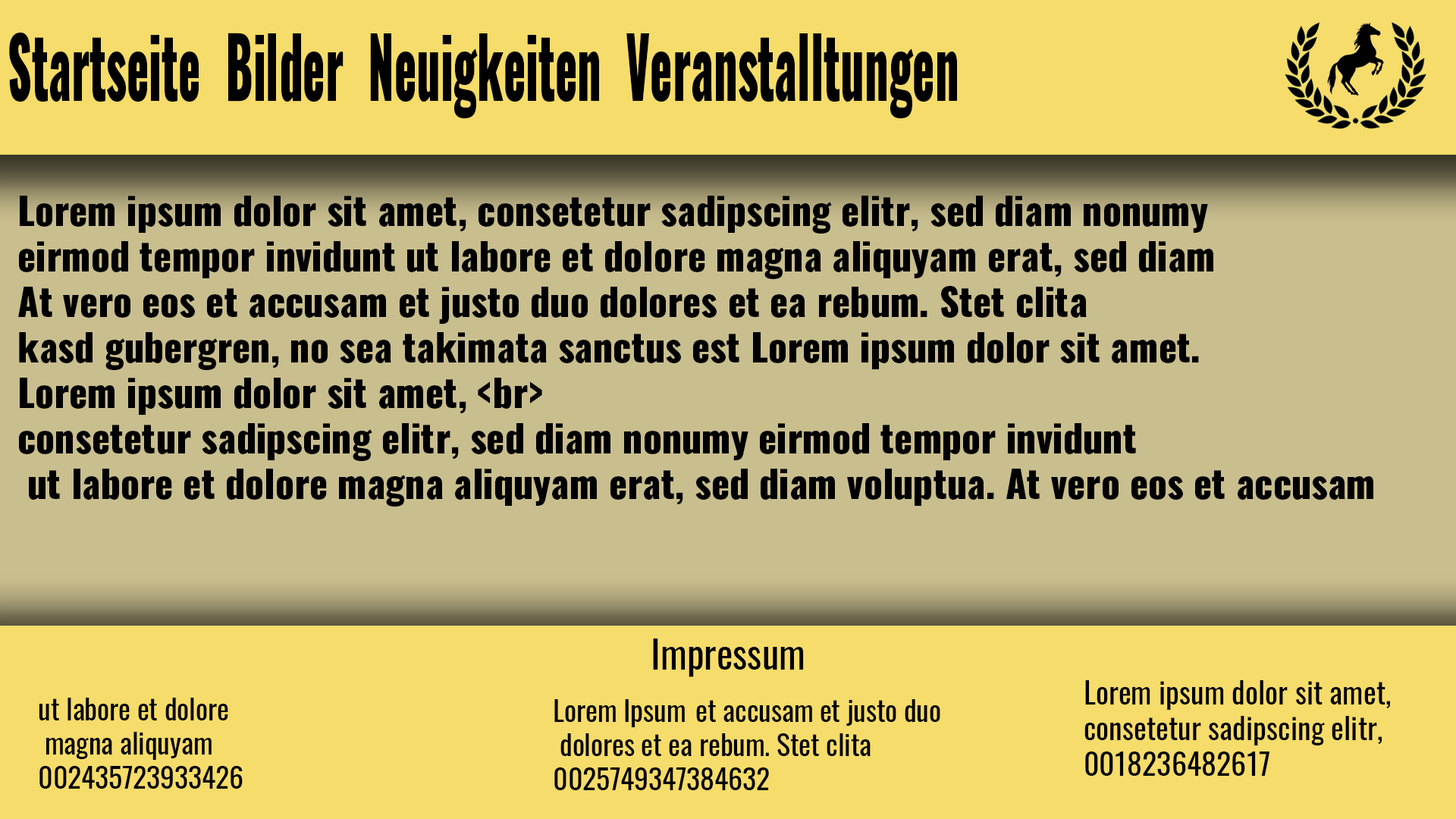
<style>
.page{position:relative;width:1456px;height:819px;background:#f6dc6a}
.page>*{position:absolute;margin:0}
.t1{font:83.3px "OswaldHeavy-Regular";color:#000000;scale:0.55 1}
.t2{font:37.9px "OswaldHeavy-Regular";color:#000000}
.t3{font:38.8px "Oswald-Regular";color:#000000}
.t4{font:29.8px "Oswald-Regular";color:#000000}
.t5{font:28.4px "Oswald-Regular";color:#000000}
</style>
<div class="page">
<p class="t1" style="left:9px;top:32px;width:948px;height:86px">Startseite  Bilder  Neuigkeiten  Veranstalltungen</p>
<p class="t2" style="left:18px;top:196px;width:1355px;height:311px">Lorem ipsum dolor sit amet, consetetur sadipscing elitr, sed diam nonumy <br>          eirmod tempor invidunt ut labore et dolore magna aliquyam erat, sed diam <br>          At vero eos et accusam et justo duo dolores et ea rebum. Stet clita <br>          kasd gubergren, no sea takimata sanctus est Lorem ipsum dolor sit amet. <br>          Lorem ipsum dolor sit amet, &lt;br&gt;<br>          consetetur sadipscing elitr, sed diam nonumy eirmod tempor invidunt <br>           ut labore et dolore magna aliquyam erat, sed diam voluptua. At vero eos et accusam</p>
<p class="t3" style="left:653px;top:639px;width:151px;height:38px">Impressum</p>
<p class="t4" style="left:1084px;top:680px;width:306px;height:96px">Lorem ipsum dolor sit amet,<br>consetetur sadipscing elitr, <br>0018236482617</p>
<p class="t5" style="left:39px;top:698px;width:204px;height:91px">ut labore et dolore<br> magna aliquyam<br>002435723933426</p>
<p class="t5" style="left:554px;top:699px;width:386px;height:91px">Lorem Ipsum et accusam et justo duo<br> dolores et ea rebum. Stet clita <br>0025749347384632</p>
</div>
